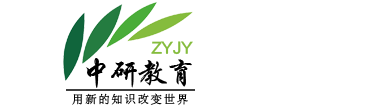
<style>
.page{position:relative;width:379px;height:107px;background:#ffffff}
.page>*{position:absolute;margin:0}
.t1{font:15.1px "FZLTCHK--GBK1-0";letter-spacing:-0.06em;color:#85bc3d}
.t2{font:30.1px "STXingkai";letter-spacing:-0.06em;color:#000000}
.t3{font:11.1px "FZLTKSK--GBK1-0";letter-spacing:0.18em;color:#000000}
</style>
<div class="page">
<p class="t1" style="left:151px;top:41px;width:42px;height:14px">ZYJY</p>
<p class="t2" style="left:86px;top:58px;width:106px;height:30px">中研教育</p>
<p class="t3" style="left:72px;top:93px;width:116px;height:12px">用新的知识改变世界</p>
</div>
